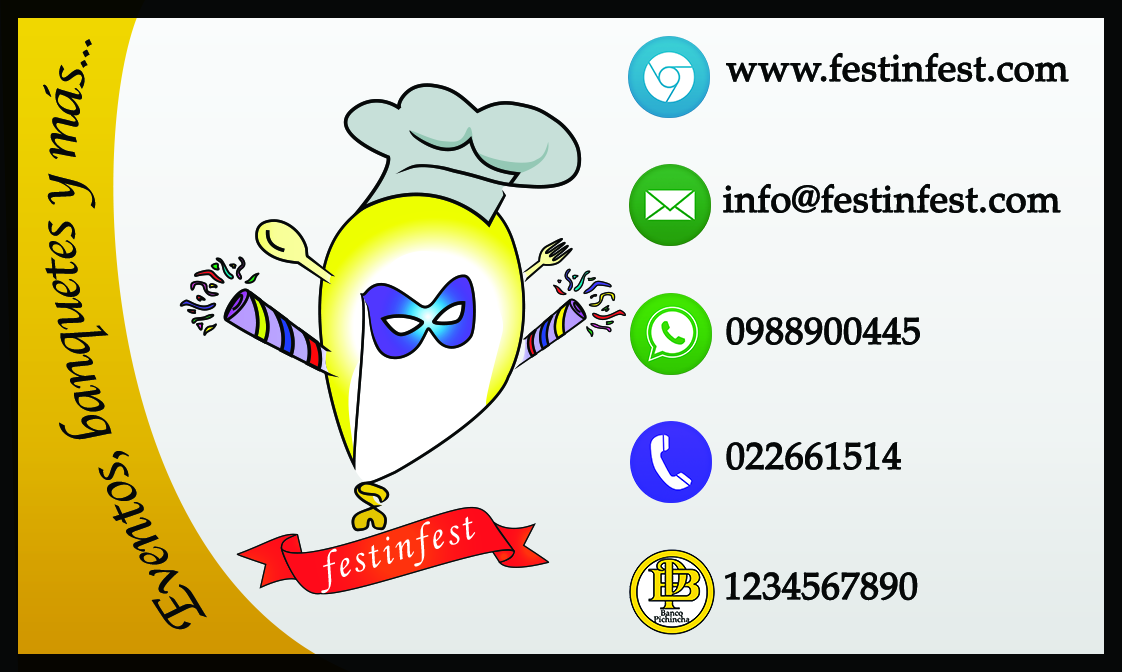
<style>
.page{position:relative;width:1122px;height:672px}
.page>*{position:absolute;margin:0}
.t1{font:54.2px "Apple-Chancery";letter-spacing:-0.025em;color:#060808}
.t2{font:37.6px "Palatino-Roman";letter-spacing:-0.01em;color:#060808;font-weight:bold}
.t3{font:37.8px "Palatino-Roman";letter-spacing:-0.01em;color:#060808;font-weight:bold}
</style>
<div class="page">
<p class="t1" style="left:43px;top:39px;width:164px;height:591px;rotate:-101deg">Eventos, banquetes y más...</p>
<p class="t2" style="left:726px;top:52px;width:343px;height:30px">www.festinfest.com</p>
<p class="t2" style="left:723px;top:183px;width:338px;height:30px">info@festinfest.com</p>
<p class="t2" style="left:726px;top:317px;width:194px;height:28px">0988900445</p>
<p class="t2" style="left:726px;top:442px;width:175px;height:28px">022661514</p>
<p class="t3" style="left:725px;top:572px;width:193px;height:29px">1234567890</p>
</div>
